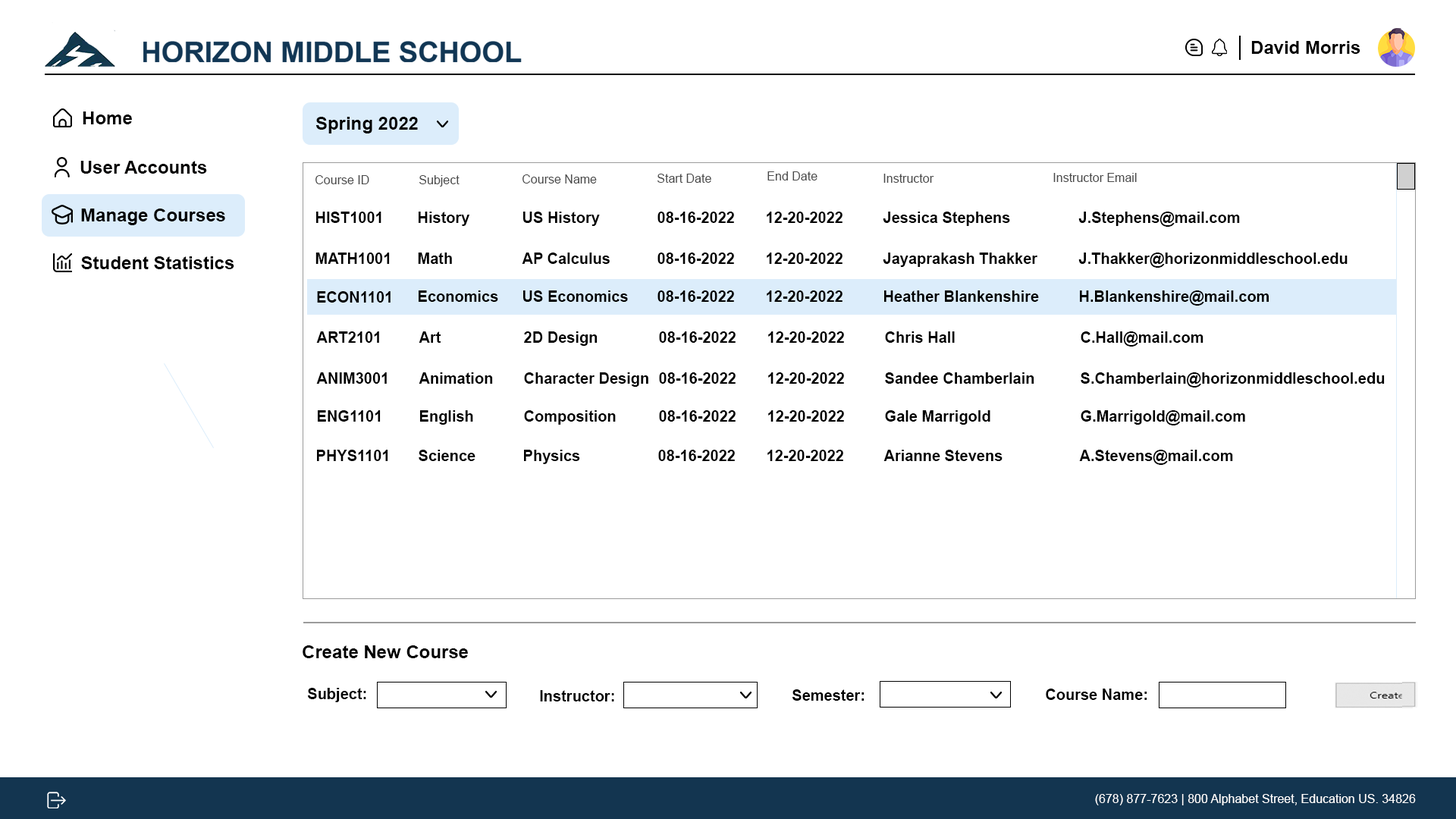
<style>
.page{position:relative;width:1456px;height:819px;background:#ffffff}
.page>*{position:absolute;margin:0}
.t1{font:18.2px "Arial-BoldMT";color:#000000}
.t2{font:18.2px "Arial-BoldMT";color:#010000}
.t3{font:12.1px "ArialMT";color:#4b4b4b}
.t4{font:15.2px "Arial-BoldMT";color:#000000}
.t5{font:12.1px "ArialMT";color:#ffffff}
</style>
<div class="page">
<p class="t1" style="left:1251px;top:41px;width:109px;height:13px">David Morris</p>
<p class="t1" style="left:83px;top:111px;width:49px;height:13px">Home</p>
<p class="t1" style="left:315px;top:117px;width:103px;height:16px">Spring 2022</p>
<p class="t2" style="left:80px;top:161px;width:127px;height:13px">User Accounts</p>
<p class="t3" style="left:657px;top:174px;width:54px;height:9px">Start Date</p>
<p class="t3" style="left:767px;top:171px;width:50px;height:9px">End Date</p>
<p class="t3" style="left:883px;top:174px;width:51px;height:9px">Instructor</p>
<p class="t3" style="left:1053px;top:173px;width:84px;height:9px">Instructor Email</p>
<p class="t3" style="left:315px;top:175px;width:54px;height:9px">Course ID</p>
<p class="t3" style="left:419px;top:175px;width:41px;height:12px">Subject</p>
<p class="t3" style="left:522px;top:174px;width:75px;height:10px">Course Name</p>
<p class="t1" style="left:81px;top:209px;width:144px;height:16px">Manage Courses</p>
<p class="t4" style="left:316px;top:212px;width:65px;height:11px">HIST1001</p>
<p class="t4" style="left:419px;top:212px;width:51px;height:14px">History</p>
<p class="t4" style="left:523px;top:212px;width:77px;height:14px">US History</p>
<p class="t4" style="left:657px;top:212px;width:77px;height:11px">08-16-2022</p>
<p class="t4" style="left:767px;top:212px;width:75px;height:11px">12-20-2022</p>
<p class="t4" style="left:883px;top:212px;width:127px;height:14px">Jessica Stephens</p>
<p class="t4" style="left:1078px;top:212px;width:162px;height:15px">J.Stephens@mail.com</p>
<p class="t1" style="left:81px;top:256px;width:153px;height:13px">Student Statistics</p>
<p class="t4" style="left:315px;top:253px;width:75px;height:11px">MATH1001</p>
<p class="t4" style="left:418px;top:253px;width:34px;height:11px">Math</p>
<p class="t4" style="left:522px;top:253px;width:88px;height:11px">AP Calculus</p>
<p class="t4" style="left:657px;top:253px;width:77px;height:11px">08-16-2022</p>
<p class="t4" style="left:767px;top:253px;width:75px;height:11px">12-20-2022</p>
<p class="t4" style="left:883px;top:253px;width:154px;height:14px">Jayaprakash Thakker</p>
<p class="t4" style="left:1078px;top:253px;width:270px;height:15px">J.Thakker@horizonmiddleschool.edu</p>
<p class="t4" style="left:317px;top:291px;width:74px;height:12px">ECON1101</p>
<p class="t4" style="left:419px;top:290px;width:79px;height:12px">Economics</p>
<p class="t4" style="left:523px;top:290px;width:105px;height:12px">US Economics</p>
<p class="t4" style="left:657px;top:290px;width:77px;height:12px">08-16-2022</p>
<p class="t4" style="left:767px;top:290px;width:75px;height:12px">12-20-2022</p>
<p class="t4" style="left:884px;top:290px;width:155px;height:12px">Heather Blankenshire</p>
<p class="t4" style="left:1080px;top:290px;width:189px;height:16px">H.Blankenshire@mail.com</p>
<p class="t4" style="left:316px;top:331px;width:63px;height:12px">ART2101</p>
<p class="t4" style="left:419px;top:331px;width:22px;height:12px">Art</p>
<p class="t4" style="left:524px;top:331px;width:74px;height:15px">2D Design</p>
<p class="t4" style="left:659px;top:331px;width:77px;height:12px">08-16-2022</p>
<p class="t4" style="left:768px;top:331px;width:76px;height:12px">12-20-2022</p>
<p class="t4" style="left:885px;top:331px;width:70px;height:12px">Chris Hall</p>
<p class="t4" style="left:1081px;top:331px;width:122px;height:16px">C.Hall@mail.com</p>
<p class="t4" style="left:316px;top:372px;width:71px;height:12px">ANIM3001</p>
<p class="t4" style="left:419px;top:372px;width:74px;height:12px">Animation</p>
<p class="t4" style="left:524px;top:372px;width:124px;height:15px">Character Design</p>
<p class="t4" style="left:659px;top:372px;width:77px;height:12px">08-16-2022</p>
<p class="t4" style="left:768px;top:372px;width:76px;height:12px">12-20-2022</p>
<p class="t4" style="left:885px;top:372px;width:149px;height:12px">Sandee Chamberlain</p>
<p class="t4" style="left:1081px;top:372px;width:304px;height:16px">S.Chamberlain@horizonmiddleschool.edu</p>
<p class="t4" style="left:318px;top:410px;width:63px;height:12px">ENG1101</p>
<p class="t4" style="left:420px;top:410px;width:53px;height:15px">English</p>
<p class="t4" style="left:524px;top:410px;width:92px;height:15px">Composition</p>
<p class="t4" style="left:659px;top:410px;width:77px;height:12px">08-16-2022</p>
<p class="t4" style="left:768px;top:410px;width:76px;height:12px">12-20-2022</p>
<p class="t4" style="left:885px;top:410px;width:105px;height:15px">Gale Marrigold</p>
<p class="t4" style="left:1081px;top:410px;width:164px;height:15px">G.Marrigold@mail.com</p>
<p class="t4" style="left:317px;top:450px;width:71px;height:11px">PHYS1101</p>
<p class="t4" style="left:419px;top:450px;width:56px;height:11px">Science</p>
<p class="t4" style="left:524px;top:450px;width:56px;height:14px">Physics</p>
<p class="t4" style="left:658px;top:450px;width:77px;height:11px">08-16-2022</p>
<p class="t4" style="left:767px;top:450px;width:76px;height:11px">12-20-2022</p>
<p class="t4" style="left:883px;top:450px;width:120px;height:11px">Arianne Stevens</p>
<p class="t4" style="left:1079px;top:450px;width:154px;height:15px">A.Stevens@mail.com</p>
<p class="t1" style="left:303px;top:645px;width:165px;height:13px">Create New Course</p>
<p class="t4" style="left:308px;top:688px;width:58px;height:14px">Subject:</p>
<p class="t4" style="left:792px;top:689px;width:72px;height:12px">Semester:</p>
<p class="t4" style="left:1046px;top:689px;width:101px;height:11px">Course Name:</p>
<p class="t4" style="left:540px;top:690px;width:74px;height:11px">Instructor:</p>
<p class="t5" style="left:1095px;top:794px;width:321px;height:11px">(678) 877-7623 | 800 Alphabet Street, Education US. 34826</p>
</div>
